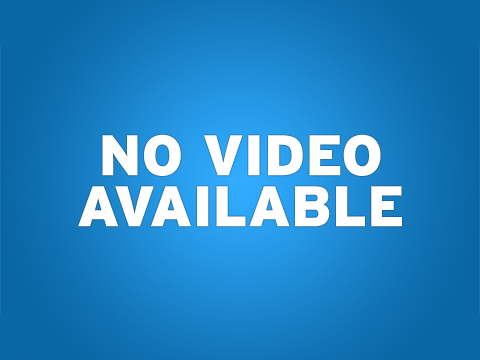
<style>
.page{position:relative;width:480px;height:360px}
.page>*{position:absolute;margin:0}
.t1{font:57px/51px "Interstate-Black";color:#ffffff}
</style>
<div class="page">
<p class="t1" style="left:78px;top:134px;width:324px;height:93px;text-align:center">NO VIDEO<br>AVAILABLE</p>
</div>
